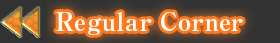
<style>
.page{position:relative;width:280px;height:43px;background:#333333}
.page>*{position:absolute;margin:0}
.t1{font:25px "RyuminPro-ExBold";color:#fffffa}
</style>
<div class="page">
<p class="t1" style="left:56px;top:12px;width:187px;height:23px">Regular Corner</p>
</div>
